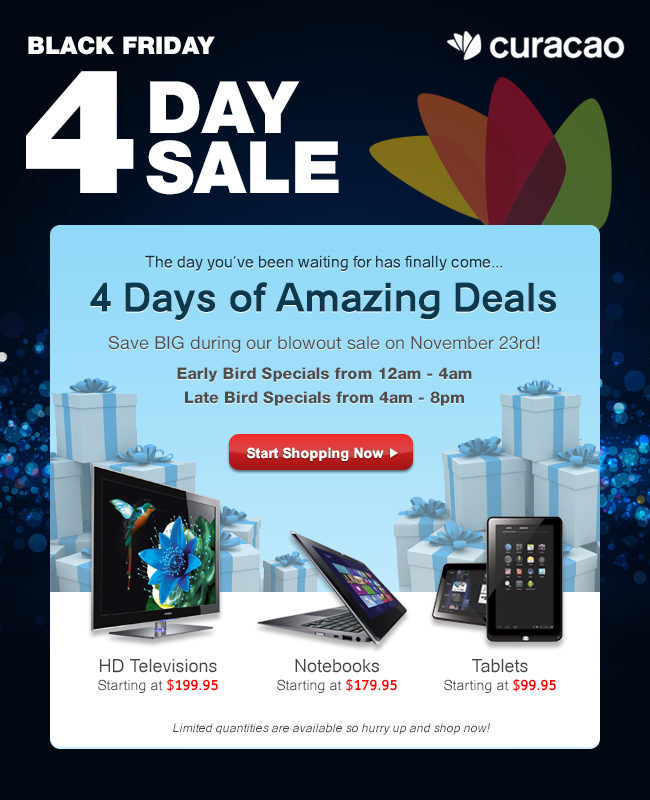
<style>
.page{position:relative;width:650px;height:800px}
.page>*{position:absolute;margin:0}
.t1{font:24px "HelveticaNeue-Black";color:#ffffff}
.t2{font:175px "HelveticaNeue-Black";color:#ffffff}
.t3{font:72px/60px "HelveticaNeue-Black";color:#ffffff}
.t4{font:24px/60px "HelveticaNeue-Black";color:#ffffff}
.t5{font:16px "Catriel";color:#0c394e}
.t6{font:40px "Catriel-Bold";color:#0c394e}
.t7{font:16px "Catriel";color:#000000}
.t8{font:18px/24px "HelveticaNeue-Roman";color:#4e4e4e}
.t9{font:16px/30px "HelveticaNeue-Heavy";color:#4e4e4e}
.t10{font:16px/24px "HelveticaNeue-Heavy";color:#4e4e4e}
.t11{font:14px "Arial-BoldMT";color:#ffffff}
.t12{font:18px/18px "Catriel";color:#444444}
.t13{font:14px/18px "Catriel";color:#444444}
.t14{font:14px/18px "Catriel-Bold";color:#ff0000}
.t15{font:18px/60px "Catriel";color:#444444}
.t16{font:12px "Catriel-Italic";color:#444444}
</style>
<div class="page">
<p class="t1" style="left:28px;top:36px;width:187px;height:19px">BLACK FRIDAY</p>
<p class="t2" style="left:26px;top:71px;width:108px;height:122px">4</p>
<p class="t3" style="left:146px;top:81px;width:193px;height:114px"><span class="t4"><br></span>DAY<br>SALE</p>
<p class="t5" style="left:145px;top:255px;width:357px;height:16px">The day you’ve been waiting for has finally come...</p>
<p class="t6" style="left:90px;top:282px;width:466px;height:38px"><span class="t7"><br></span>4 Days of Amazing Deals</p>
<p class="t8" style="left:108px;top:336px;width:432px;height:70px;text-align:center">Save BIG during our blowout sale on November 23rd!<br><span class="t9">Early Bird Specials from 12am - 4am<br></span><span class="t10">Late Bird Specials from 4am - 8pm</span></p>
<p class="t11" style="left:247px;top:447px;width:137px;height:14px">Start Shopping Now</p>
<p class="t12" style="left:98px;top:659px;width:120px;height:34px;text-align:center">HD Televisions<br><span class="t13">Starting at </span><span class="t14">$199.95</span></p>
<p class="t13" style="left:277px;top:659px;width:120px;height:34px;text-align:center"><span class="t15">Notebooks<br></span>Starting at <span class="t14">$179.95</span></p>
<p class="t13" style="left:444px;top:659px;width:112px;height:34px;text-align:center"><span class="t15">Tablets<br></span>Starting at <span class="t14">$99.95</span></p>
<p class="t16" style="left:173px;top:723px;width:318px;height:12px">Limited quantities are available so hurry up and shop now!</p>
</div>
